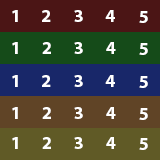
<style>
.page{position:relative;width:160px;height:160px}
.page>*{position:absolute;margin:0}
.t1{font:18px "MyriadPro-Bold";color:#ffffff}
</style>
<div class="page">
<p class="t1" style="left:12px;top:10px;width:6px;height:12px">1</p>
<p class="t1" style="left:42px;top:10px;width:9px;height:12px">2</p>
<p class="t1" style="left:74px;top:10px;width:9px;height:12px">3</p>
<p class="t1" style="left:105px;top:10px;width:10px;height:12px">4</p>
<p class="t1" style="left:139px;top:11px;width:9px;height:12px">5</p>
<p class="t1" style="left:12px;top:42px;width:6px;height:12px">1</p>
<p class="t1" style="left:42px;top:42px;width:9px;height:12px">2</p>
<p class="t1" style="left:74px;top:42px;width:9px;height:12px">3</p>
<p class="t1" style="left:106px;top:42px;width:10px;height:12px">4</p>
<p class="t1" style="left:139px;top:43px;width:9px;height:12px">5</p>
<p class="t1" style="left:12px;top:75px;width:6px;height:12px">1</p>
<p class="t1" style="left:42px;top:75px;width:9px;height:12px">2</p>
<p class="t1" style="left:74px;top:75px;width:9px;height:12px">3</p>
<p class="t1" style="left:105px;top:75px;width:10px;height:12px">4</p>
<p class="t1" style="left:139px;top:76px;width:9px;height:12px">5</p>
<p class="t1" style="left:12px;top:107px;width:6px;height:12px">1</p>
<p class="t1" style="left:42px;top:107px;width:9px;height:12px">2</p>
<p class="t1" style="left:74px;top:107px;width:9px;height:12px">3</p>
<p class="t1" style="left:106px;top:107px;width:10px;height:12px">4</p>
<p class="t1" style="left:139px;top:108px;width:9px;height:12px">5</p>
<p class="t1" style="left:12px;top:137px;width:6px;height:12px">1</p>
<p class="t1" style="left:42px;top:137px;width:9px;height:12px">2</p>
<p class="t1" style="left:74px;top:137px;width:9px;height:12px">3</p>
<p class="t1" style="left:106px;top:137px;width:10px;height:12px">4</p>
<p class="t1" style="left:139px;top:138px;width:9px;height:12px">5</p>
</div>
